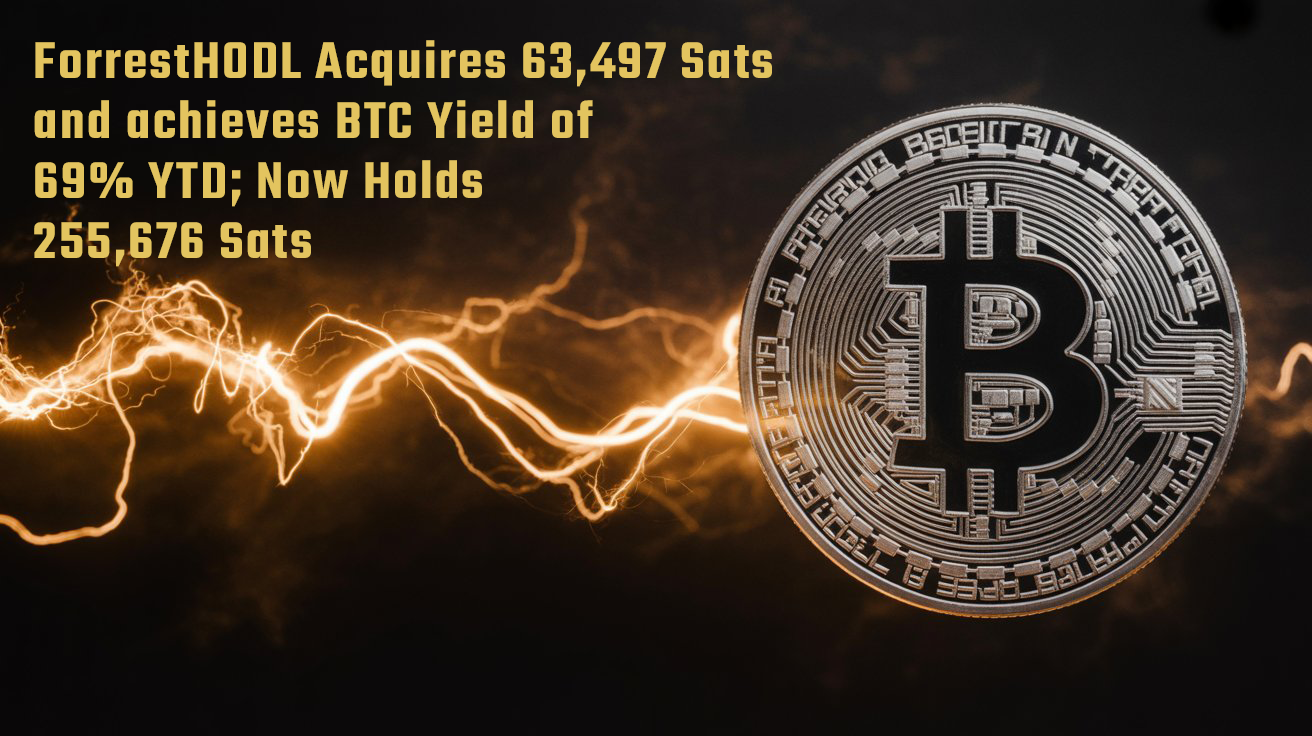
<style>
.page{position:relative;width:1312px;height:736px}
.page>*{position:absolute;margin:0}
.t1{font:56.2px/60px "Teko-SemiBold";letter-spacing:0.04em;color:#e3c45f}
</style>
<div class="page">
<p class="t1" style="left:34px;top:40px;width:738px;height:227px">ForrestHODL Acquires 63,497 Sats<br>and achieves BTC Yield of<br>69% YTD; Now Holds<br>255,676 Sats</p>
</div>
